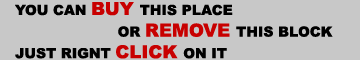
<style>
.page{position:relative;width:360px;height:60px;background:#c8c8c8}
.page>*{position:absolute;margin:0}
.t1{font:14px "Arial-Black";color:#000000}
.t2{font:18px "Arial-Black";color:#c80000}
</style>
<div class="page">
<p class="t1" style="left:15px;top:2px;width:318px;height:57px">YOU CAN <span class="t2">BUY </span>THIS PLACE <br>                      OR <span class="t2">REMOVE </span>THIS BLOCK<br>JUST RIGNT <span class="t2">CLICK </span>ON IT</p>
</div>
